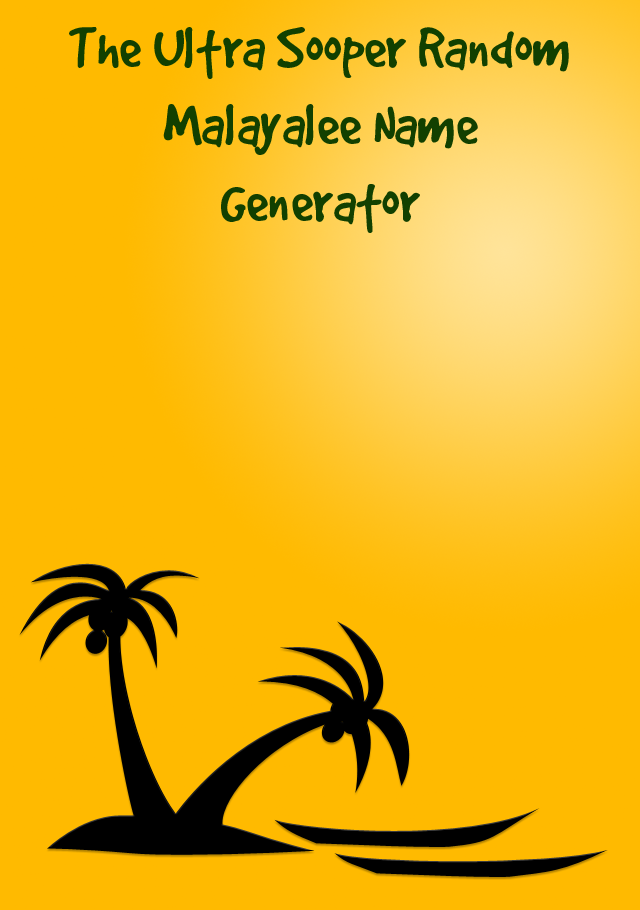
<style>
.page{position:relative;width:640px;height:910px;background:#ffba00}
.page>*{position:absolute;margin:0}
.t1{font:64.2px "GoodDog";color:#124000}
</style>
<div class="page">
<p class="t1" style="left:69px;top:27px;width:500px;height:206px;text-align:center">The Ultra Sooper Random<br>Malayalee Name<br>Generator</p>
</div>
